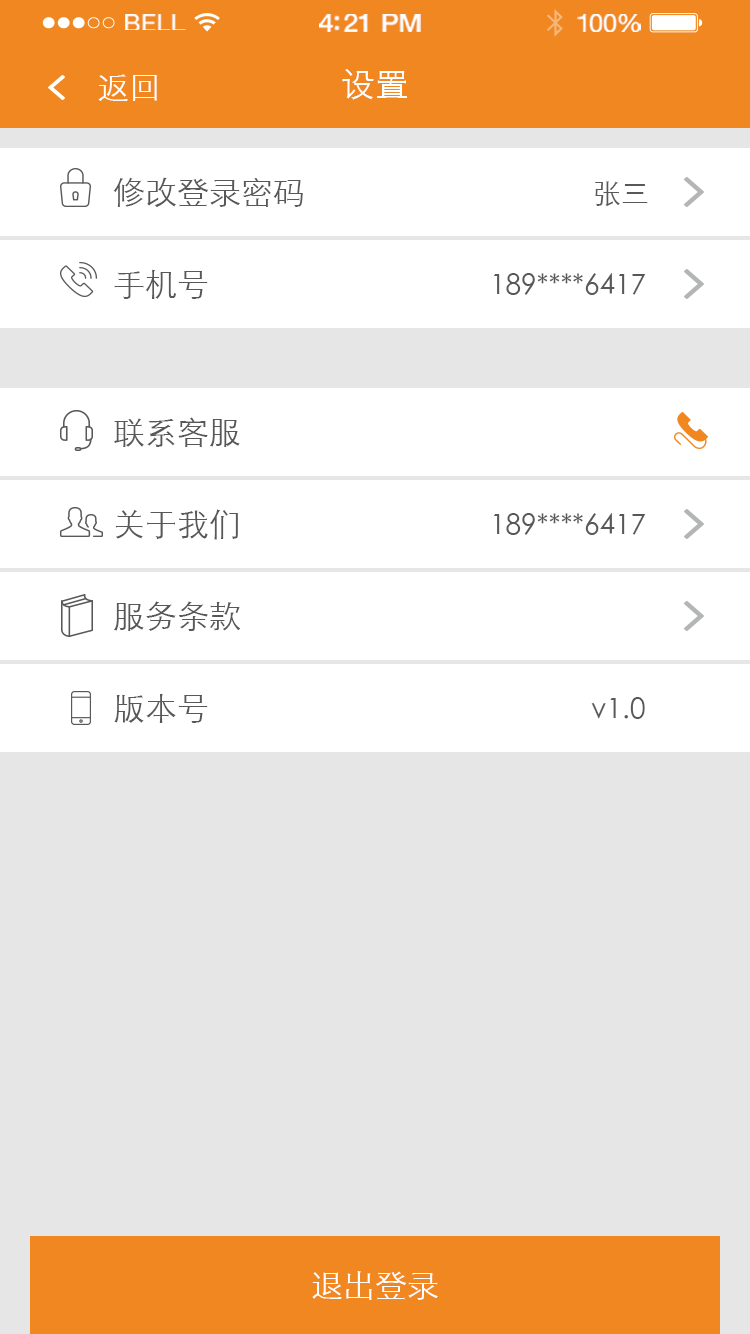
<style>
.page{position:relative;width:750px;height:1334px;background:#e6e6e6}
.page>*{position:absolute;margin:0}
.t1{font:23.3px "HelveticaNeue";letter-spacing:0.02em;color:#ffffff;scale:1.06 1}
.t2{font:25.3px "HelveticaNeue-Medium";letter-spacing:-0.02em;color:#ffffff;scale:1.06 1}
.t3{font:24.3px "HelveticaNeue";letter-spacing:-0.02em;color:#ffffff;scale:1.06 1}
.t4{font:32px "STXihei";color:#ffffff}
.t5{font:34px "STXihei";color:#ffffff}
.t6{font:32px "STXihei";color:#595757}
.t7{font:28px "STXihei";color:#595757}
</style>
<div class="page">
<p class="t1" style="left:125px;top:14px;width:61px;height:16px">BELL</p>
<p class="t2" style="left:319px;top:14px;width:102px;height:18px">4:21 PM</p>
<p class="t3" style="left:577px;top:14px;width:64px;height:18px">100%</p>
<p class="t4" style="left:98px;top:74px;width:59px;height:27px">返回</p>
<p class="t5" style="left:342px;top:69px;width:65px;height:31px">设置</p>
<p class="t6" style="left:113px;top:177px;width:190px;height:30px">修改登录密码</p>
<p class="t7" style="left:595px;top:181px;width:53px;height:26px">张三</p>
<p class="t6" style="left:114px;top:269px;width:94px;height:30px">手机号</p>
<p class="t7" style="left:494px;top:273px;width:152px;height:22px">189****6417</p>
<p class="t6" style="left:114px;top:417px;width:126px;height:30px">联系客服</p>
<p class="t6" style="left:116px;top:509px;width:122px;height:31px">关于我们</p>
<p class="t7" style="left:494px;top:513px;width:152px;height:22px">189****6417</p>
<p class="t6" style="left:114px;top:601px;width:127px;height:30px">服务条款</p>
<p class="t6" style="left:114px;top:694px;width:94px;height:29px">版本号</p>
<p class="t7" style="left:591px;top:697px;width:54px;height:22px">v1.0</p>
<p class="t4" style="left:312px;top:1271px;width:126px;height:29px">退出登录</p>
</div>
